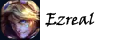
<style>
.page{position:relative;width:140px;height:40px;background:#ffffff}
.page>*{position:absolute;margin:0}
.t1{font:12px "VinerHandITC";color:#000000}
</style>
<div class="page">
<p class="t1" style="left:45px;top:12px;width:50px;height:15px">Ezreal</p>
</div>
